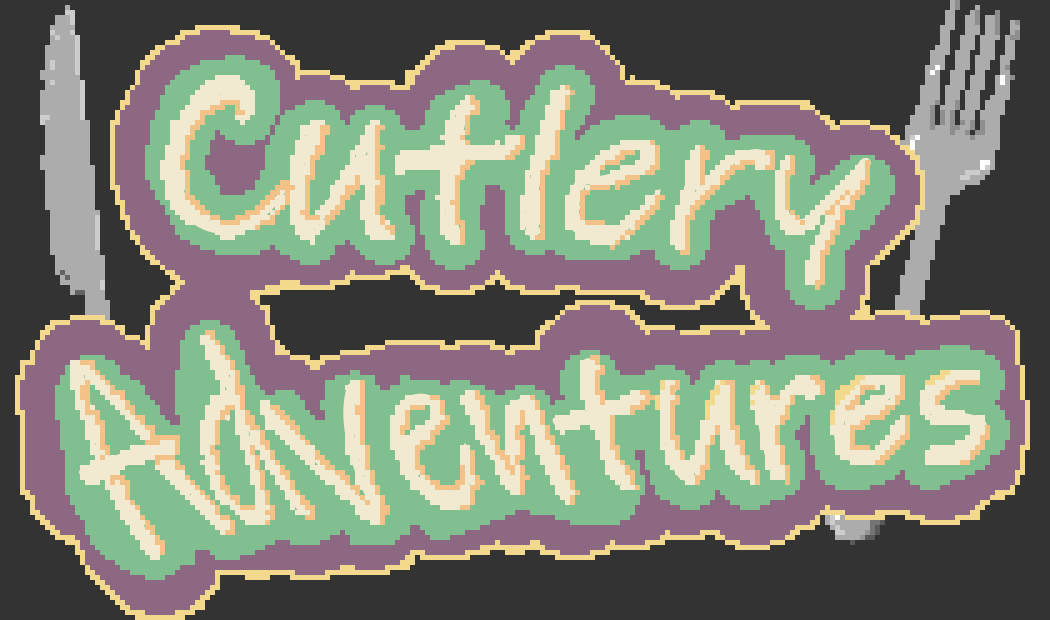
<style>
.page{position:relative;width:1050px;height:620px;background:#333333}
.page>*{position:absolute;margin:0}
.t1{font:208.3px "InkFree";color:#f2ead0}
</style>
<div class="page">
<p class="t1" style="left:70px;top:80px;width:917px;height:476px;text-align:center">Cutlery<br>Adventures</p>
</div>
